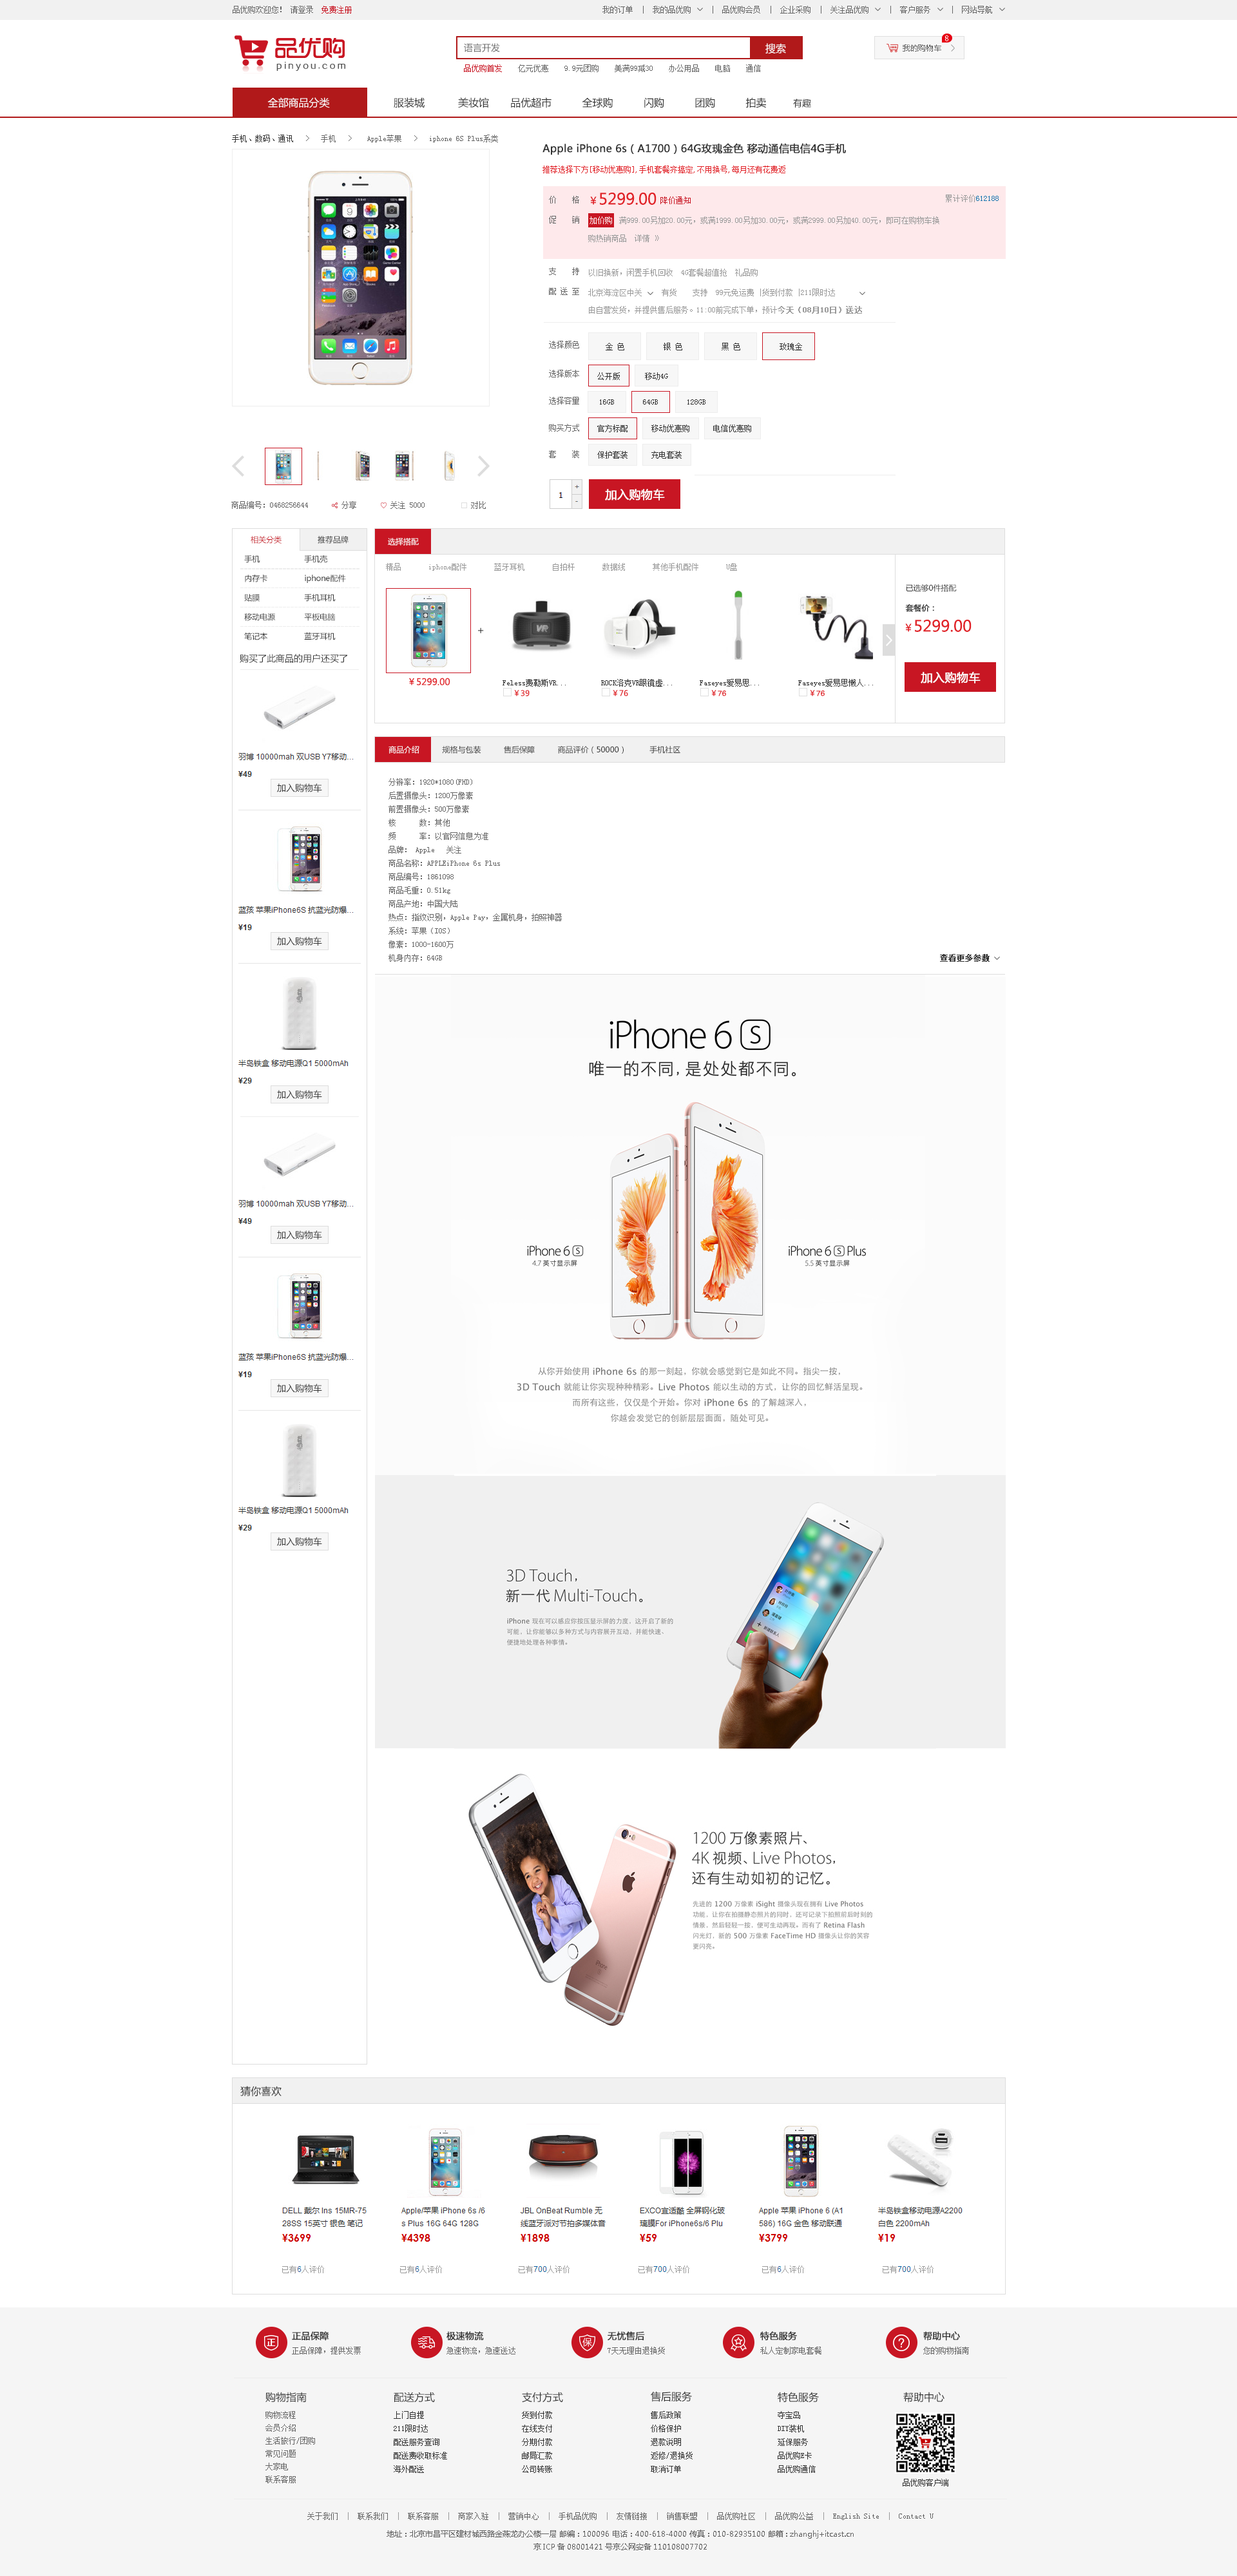
<style>
.page{position:relative;width:1237px;height:2576px;background:#ffffff}
.page>*{position:absolute;margin:0}
.t1{font:7.7px "SimSun";color:#666666}
.t2{font:7.7px "SimSun";color:#c81623}
.t3{font:7.7px "MicrosoftYaHei";color:#fefefe}
.t4{font:9px "MicrosoftYaHei";color:#666666}
.t5{font:10.3px "MicrosoftYaHei";color:#ffffff}
.t6{font:7.7px "MicrosoftYaHei";color:#666666}
.t7{font:10.3px "MicrosoftYaHei";color:#333333}
.t8{font:9px "MicrosoftYaHei";color:#333333}
.t9{font:7.7px "SimSun";color:#333333}
.t10{font:10.3px "MicrosoftYaHei";color:#333333;font-weight:bold}
.t11{font:7.7px "SimSun";color:#e12228}
.t12{font:7.7px/20px "SimSun";color:#666666}
.t13{font:15.5px "MicrosoftYaHei";color:#e12228}
.t14{font:10.3px "MicrosoftYaHei";color:#e12228}
.t15{font:7.7px "SimSun";color:#1474af}
.t16{font:7.7px "SimSun";color:#999999}
.t17{font:7.7px/18px "SimSun";color:#999999}
.t18{font:7.7px "SimSun";color:#ffffff}
.t19{font:7.7px "SimSun";color:#999999;font-weight:bold}
.t20{font:7.7px/27.1px "SimSun";color:#666666}
.t21{font:7.7px/29px "SimSun";color:#666666}
.t22{font:7.7px/26.4px "SimSun";color:#666666}
.t23{font:7.7px/22.5px "SimSun";color:#666666}
.t24{font:11.6px "MicrosoftYaHei";color:#ffffff;font-weight:bold}
.t25{font:7.7px "MicrosoftYaHei";color:#c81623}
.t26{font:7.7px "MicrosoftYaHei";color:#333333}
.t27{font:7.7px "MicrosoftYaHei";color:#ffffff}
.t28{font:7.7px/19.3px "MicrosoftYaHei";color:#333333}
.t29{font:7.7px "SimSun";color:#ededed}
.t30{font:7.7px/20px "MicrosoftYaHei";color:#333333}
.t31{font:7.7px/20px "MicrosoftYaHei";color:#333333;font-weight:bold}
.t32{font:10.3px "CloudHeiPingGBK";color:#474747}
.t33{font:9px "MicrosoftYaHei";color:#e12228}
.t34{font:7.7px "MicrosoftYaHei";color:#e12228}
.t35{font:7.7px "CloudHeiPingGBK";color:#e12228}
.t36{font:7.7px "SimSun";color:#333333;font-weight:bold}
.t37{font:9px "MicrosoftYaHei";color:#333333;font-weight:bold}
.t38{font:7.7px/12.9px "SimSun";color:#666666}
.t39{font:7.7px/13.5px "SimSun";color:#333333}
.t40{font:7.7px/12.9px "MicrosoftYaHei";color:#666666}
.t41{font:7.7px/18px "SimSun";color:#666666}
.t42{font:7.7px/8.4px "MicrosoftYaHei";color:#666666}
</style>
<div class="page">
<p class="t1" style="left:233px;top:6px;width:119px;height:8px">品优购欢迎您！ 请登录  <span class="t2">免费注册</span></p>
<p class="t1" style="left:602px;top:6px;width:390px;height:8px">我的订单  |  我的品优购     |  品优购会员  |  企业采购  |  关注品优购     |  客户服务     |  网站导航</p>
<p class="t3" style="left:945px;top:35px;width:3px;height:6px">8</p>
<p class="t4" style="left:464px;top:43px;width:36px;height:9px">语言开发</p>
<p class="t5" style="left:765px;top:43px;width:21px;height:11px">搜索</p>
<p class="t6" style="left:902px;top:44px;width:39px;height:8px">我的购物车</p>
<p class="t1" style="left:464px;top:64px;width:297px;height:8px"><span class="t2">品优购首发 </span>   亿元优惠    9.9元团购    美满99减30    办公用品    电脑    通信</p>
<p class="t7" style="left:267px;top:97px;width:544px;height:11px"><span class="t5">         全部商品分类                     </span>服装城           美妆馆       品优超市          全球购          闪购          团购          拍卖<span class="t8">          有趣</span></p>
<p class="t1" style="left:232px;top:135px;width:266px;height:7px"><span class="t9">手机、数码、通讯</span>   〉  手机   〉   Apple苹果   &gt;   iphone 6S Plus系类</p>
<p class="t10" style="left:542px;top:143px;width:304px;height:12px">Apple iPhone 6s（A1700）64G玫瑰金色 移动通信电信4G手机</p>
<p class="t11" style="left:542px;top:166px;width:243px;height:7px">推荐选择下方[移动优惠购],手机套餐齐搞定,不用换号,每月还有花费返</p>
<p class="t12" style="left:549px;top:196px;width:30px;height:28px">价    格<br>促    销</p>
<p class="t13" style="left:590px;top:193px;width:66px;height:12px"><span class="t14">￥</span>5299.00</p>
<p class="t2" style="left:660px;top:196px;width:31px;height:8px">降价通知</p>
<p class="t15" style="left:946px;top:195px;width:52px;height:7px"><span class="t16">累计评价</span>612188</p>
<p class="t17" style="left:588px;top:216px;width:351px;height:26px">满999.00另加20.00元，或满1999.00另加30.00元，或满2999.00另加40.00元，即可在购物车换<br>购热销商品  详情 》</p>
<p class="t18" style="left:589px;top:216px;width:23px;height:8px">加价购</p>
<p class="t12" style="left:549px;top:267px;width:30px;height:28px">支    持<br>配 送 至</p>
<p class="t16" style="left:589px;top:269px;width:169px;height:7px">以旧换新，闲置手机回收  4G套餐超值抢  礼品购</p>
<p class="t16" style="left:588px;top:289px;width:247px;height:7px">北京海淀区中关     有货    支持  99元免运费 |货到付款 |211限时达</p>
<p class="t16" style="left:589px;top:306px;width:273px;height:8px">由自营发货，并提供售后服务。11:00前完成下单，预计<span class="t19">今天（08月10日）送达</span></p>
<p class="t20" style="left:549px;top:341px;width:30px;height:117px"><span class="t21">选择颜色<br></span>选择版本<br>选择容量<br><span class="t22">购买方式<br></span><span class="t23">套    装</span></p>
<p class="t9" style="left:606px;top:343px;width:18px;height:7px">金 色</p>
<p class="t9" style="left:663px;top:343px;width:19px;height:7px">银 色</p>
<p class="t9" style="left:721px;top:343px;width:19px;height:7px">黑 色</p>
<p class="t9" style="left:779px;top:343px;width:23px;height:7px">玫瑰金</p>
<p class="t9" style="left:597px;top:372px;width:23px;height:8px">公开版</p>
<p class="t9" style="left:645px;top:372px;width:23px;height:8px">移动4G</p>
<p class="t9" style="left:600px;top:399px;width:14px;height:6px">16GB</p>
<p class="t9" style="left:643px;top:399px;width:15px;height:6px">64GB</p>
<p class="t9" style="left:687px;top:399px;width:18px;height:6px">128GB</p>
<p class="t9" style="left:597px;top:425px;width:30px;height:7px">官方标配</p>
<p class="t9" style="left:651px;top:425px;width:38px;height:7px">移动优惠购</p>
<p class="t9" style="left:713px;top:425px;width:38px;height:7px">电信优惠购</p>
<p class="t9" style="left:597px;top:451px;width:30px;height:8px">保护套装</p>
<p class="t9" style="left:651px;top:451px;width:31px;height:8px">充电套装</p>
<p class="t24" style="left:605px;top:489px;width:60px;height:12px">加入购物车</p>
<p class="t1" style="left:231px;top:501px;width:77px;height:8px">商品编号：0468256644</p>
<p class="t1" style="left:341px;top:501px;width:15px;height:8px">分享</p>
<p class="t1" style="left:390px;top:501px;width:35px;height:8px">关注 5000</p>
<p class="t1" style="left:471px;top:501px;width:15px;height:8px">对比</p>
<p class="t25" style="left:251px;top:535px;width:30px;height:9px">相关分类</p>
<p class="t26" style="left:318px;top:536px;width:30px;height:8px">推荐品牌</p>
<p class="t27" style="left:388px;top:538px;width:31px;height:8px">选择搭配</p>
<p class="t28" style="left:244px;top:555px;width:31px;height:85px">手机<br>内存卡<br>贴膜<br>移动电源<br>笔记本</p>
<p class="t28" style="left:304px;top:555px;width:42px;height:85px">手机壳<br>iphone配件<br>手机耳机<br>平板电脑<br>蓝牙耳机</p>
<p class="t29" style="left:240px;top:568px;width:119px;height:1px">-------------------------------</p>
<p class="t29" style="left:240px;top:569px;width:119px;height:0px">-------------------------------</p>
<p class="t16" style="left:386px;top:563px;width:351px;height:8px">精品       iphone配件       蓝牙耳机       自拍杆       数据线       其他手机配件       U盘</p>
<p class="t29" style="left:240px;top:587px;width:119px;height:1px">-------------------------------</p>
<p class="t30" style="left:905px;top:584px;width:52px;height:28px">已选够0件搭配<br><span class="t31">套餐价：</span></p>
<p class="t29" style="left:240px;top:607px;width:119px;height:0px">-------------------------------</p>
<p class="t29" style="left:240px;top:626px;width:119px;height:1px">-------------------------------</p>
<p class="t32" style="left:478px;top:627px;width:6px;height:6px">+</p>
<p class="t13" style="left:905px;top:620px;width:66px;height:12px"><span class="t14">￥</span>5299.00</p>
<p class="t8" style="left:240px;top:654px;width:107px;height:9px">购买了此商品的用户还买了</p>
<p class="t33" style="left:409px;top:678px;width:41px;height:7px">￥5299.00</p>
<p class="t24" style="left:921px;top:672px;width:59px;height:11px">加入购物车</p>
<p class="t9" style="left:502px;top:679px;width:64px;height:8px">Feless费勒斯VR...</p>
<p class="t34" style="left:514px;top:690px;width:16px;height:6px">￥39</p>
<p class="t9" style="left:601px;top:679px;width:71px;height:8px">ROCK洛克VR眼镜虚...</p>
<p class="t34" style="left:613px;top:690px;width:15px;height:6px">￥76</p>
<p class="t9" style="left:700px;top:679px;width:59px;height:8px">Faseyes爱易思...</p>
<p class="t35" style="left:711px;top:690px;width:15px;height:6px"><span class="t34">￥</span>76</p>
<p class="t9" style="left:798px;top:679px;width:75px;height:8px">Faseyes爱易思懒人...</p>
<p class="t35" style="left:810px;top:690px;width:15px;height:6px"><span class="t34">￥</span>76</p>
<p class="t26" style="left:388px;top:746px;width:292px;height:8px"><span class="t27">商品介绍         </span> 规格与包装          售后保障          商品评价（50000）          手机社区</p>
<p class="t8" style="left:277px;top:783px;width:45px;height:9px">加入购物车</p>
<p class="t1" style="left:388px;top:778px;width:174px;height:184px">分辨率：1920*1080(FHD)<br>后置摄像头：1200万像素<br>前置摄像头：500万像素<br>核      数：其他<br>频      率：以官网信息为准<br>品牌： Apple ♥关注<br>商品名称：APPLEiPhone 6s Plus<br>商品编号：1861098<br>商品毛重：0.51kg<br>商品产地：中国大陆<br>热点：指纹识别，Apple Pay，金属机身，拍照神器<br>系统：苹果（IOS）<br>像素：1000-1600万<br>机身内存：64GB</p>
<p class="t8" style="left:277px;top:937px;width:45px;height:9px">加入购物车</p>
<p class="t36" style="left:940px;top:954px;width:49px;height:8px">查看更多参数</p>
<p class="t8" style="left:277px;top:1090px;width:45px;height:9px">加入购物车</p>
<p class="t8" style="left:277px;top:1230px;width:45px;height:9px">加入购物车</p>
<p class="t8" style="left:277px;top:1384px;width:45px;height:9px">加入购物车</p>
<p class="t8" style="left:277px;top:1537px;width:45px;height:9px">加入购物车</p>
<p class="t7" style="left:240px;top:2086px;width:41px;height:11px">猜你喜欢</p>
<p class="t37" style="left:292px;top:2331px;width:37px;height:10px">正品保障</p>
<p class="t37" style="left:446px;top:2331px;width:38px;height:9px">极速物流</p>
<p class="t37" style="left:607px;top:2331px;width:38px;height:9px">无忧售后</p>
<p class="t37" style="left:759px;top:2331px;width:38px;height:10px">特色服务</p>
<p class="t37" style="left:923px;top:2331px;width:37px;height:10px">帮助中心</p>
<p class="t1" style="left:292px;top:2347px;width:69px;height:7px">正品保障，提供发票</p>
<p class="t1" style="left:446px;top:2347px;width:69px;height:7px">急速物流，急速送达</p>
<p class="t1" style="left:607px;top:2347px;width:58px;height:7px">7天无理由退换货</p>
<p class="t1" style="left:760px;top:2347px;width:61px;height:7px">私人定制家电套餐</p>
<p class="t1" style="left:923px;top:2347px;width:46px;height:7px">您的购物指南</p>
<p class="t7" style="left:265px;top:2392px;width:42px;height:10px">购物指南</p>
<p class="t7" style="left:394px;top:2392px;width:41px;height:11px">配送方式</p>
<p class="t7" style="left:522px;top:2392px;width:41px;height:11px">支付方式</p>
<p class="t7" style="left:651px;top:2391px;width:41px;height:11px">售后服务</p>
<p class="t7" style="left:778px;top:2392px;width:41px;height:11px">特色服务</p>
<p class="t7" style="left:903px;top:2392px;width:41px;height:11px">帮助中心</p>
<p class="t38" style="left:265px;top:2411px;width:50px;height:72px">购物流程<br>会员介绍<br>生活旅行/团购<br>常见问题<br>大家电<br>联系客服</p>
<p class="t39" style="left:394px;top:2411px;width:53px;height:62px">上门自提<br>211限时达<br>配送服务查询<br>配送费收取标准<br>海外配送</p>
<p class="t39" style="left:522px;top:2411px;width:30px;height:62px">货到付款<br>在线支付<br>分期付款<br>邮局汇款<br>公司转账</p>
<p class="t39" style="left:651px;top:2411px;width:41px;height:62px">售后政策<br>价格保护<br>退款说明<br>返修/退换货<br>取消订单</p>
<p class="t39" style="left:778px;top:2411px;width:38px;height:62px">夺宝岛<br>DIY装机<br>延保服务<br>品优购E卡<br>品优购通信</p>
<p class="t9" style="left:902px;top:2479px;width:46px;height:7px">品优购客户端</p>
<p class="t40" style="left:307px;top:2512px;width:626px;height:38px;text-align:center"><span class="t41">关于我们  </span><span class="t17">|</span><span class="t41">  联系我们  </span><span class="t17">|</span><span class="t41">  联系客服  </span><span class="t17">|</span><span class="t41">  商家入驻  </span><span class="t17">|</span><span class="t41">  营销中心  </span><span class="t17">|</span><span class="t41">  手机品优购  </span><span class="t17">|</span><span class="t41">  友情链接  </span><span class="t17">|</span><span class="t41">  销售联盟  </span><span class="t17">|</span><span class="t41">  品优购社区  </span><span class="t17">|</span><span class="t41">  品优购公益  </span><span class="t17">|</span><span class="t41">  English Site  </span><span class="t17">|</span><span class="t41">  Contact U<br></span>地址：北京市昌平区建材城西路金燕龙办公楼一层 邮编：100096 电话：400-618-4000 传真：010-82935100 邮箱: zhanghj+itcast.cn<br><span class="t42">京ICP备08001421号京公网安备110108007702</span></p>
</div>
